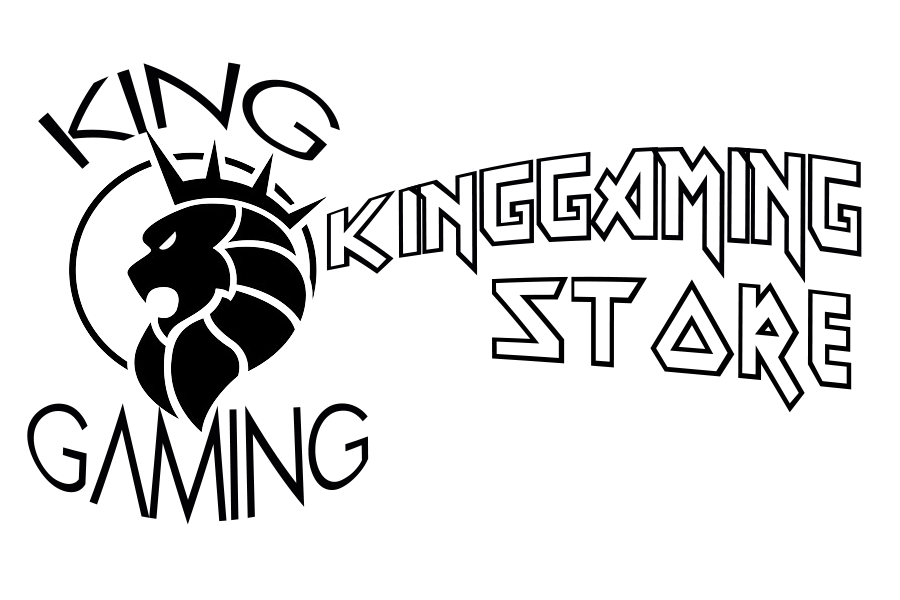
<style>
.page{position:relative;width:900px;height:600px;background:#ffffff}
.page>*{position:absolute;margin:0}
.t1{font:89px "Pasajero";color:#020204}
.t2{font:89px "Eddie";color:#020204}
.t3{font:89px "Eddie";color:#000000}
</style>
<div class="page">
<p class="t1" style="left:38px;top:62px;width:302px;height:107px">KING</p>
<p class="t2" style="left:326px;top:145px;width:536px;height:268px;text-align:center">KINGGAMING<br>       <span class="t3">STORE</span></p>
<p class="t1" style="left:27px;top:403px;width:342px;height:122px">GAMING</p>
</div>
